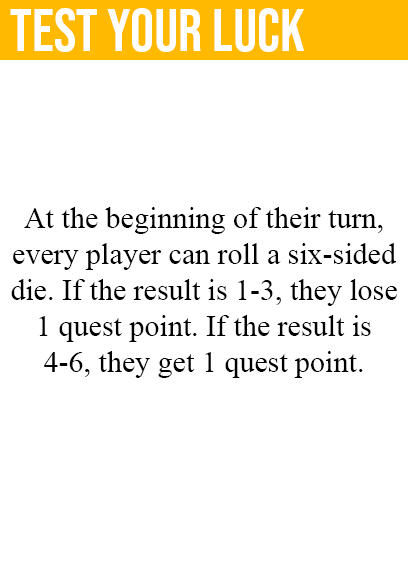
<style>
.page{position:relative;width:408px;height:585px;background:#ffffff}
.page>*{position:absolute;margin:0}
.t1{font:60px "BebasNeue-Regular";color:#ffffff}
.t2{font:30px "TimesNewRomanPSMT";color:#000000}
</style>
<div class="page">
<p class="t1" style="left:10px;top:8px;width:294px;height:44px">test your luck</p>
<p class="t2" style="left:11px;top:207px;width:386px;height:171px;text-align:center">At the beginning of their turn,<br>every player can roll a six-sided<br>die. If the result is 1-3, they lose<br>1 quest point. If the result is<br>4-6, they get 1 quest point.</p>
</div>
